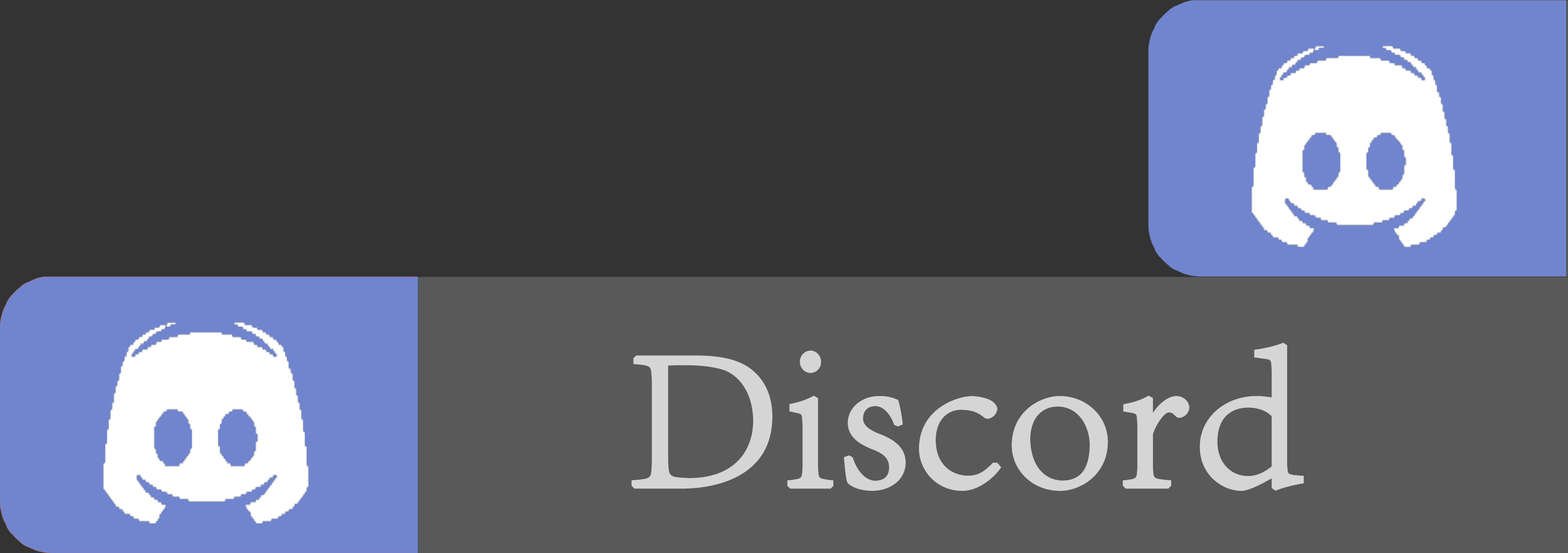
<style>
.page{position:relative;width:1568px;height:553px;background:#333333}
.page>*{position:absolute;margin:0}
.t1{font:203.8px "AdobeSongStd-Light";color:#d5d5d5;font-weight:bold}
</style>
<div class="page">
<p class="t1" style="left:631px;top:343px;width:673px;height:149px">Discord</p>
</div>
